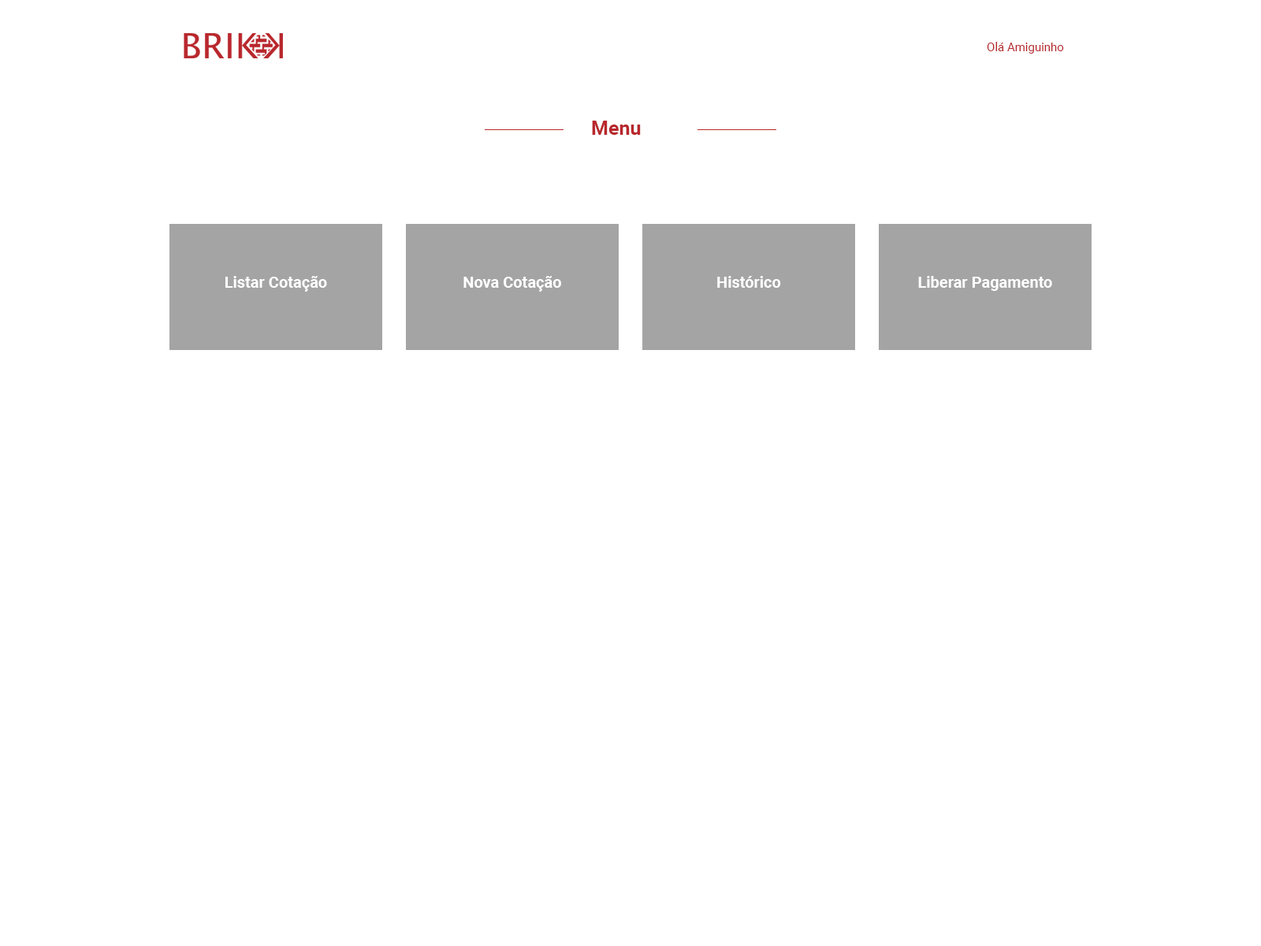
<style>
.page{position:relative;width:1261px;height:946px;background:#ffffff}
.page>*{position:absolute;margin:0}
.t1{font:11.8px "Roboto-Regular";color:#b8272c}
.t2{font:19.7px "Roboto-Bold";color:#b8272c}
.t3{font:15.8px "Roboto-Bold";color:#ffffff}
</style>
<div class="page">
<p class="t1" style="left:987px;top:42px;width:77px;height:12px">Olá Amiguinho</p>
<p class="t2" style="left:592px;top:121px;width:49px;height:14px">Menu</p>
<p class="t3" style="left:225px;top:276px;width:102px;height:16px">Listar Cotação</p>
<p class="t3" style="left:463px;top:276px;width:98px;height:16px">Nova Cotação</p>
<p class="t3" style="left:717px;top:276px;width:64px;height:12px">Histórico</p>
<p class="t3" style="left:918px;top:276px;width:134px;height:15px">Liberar Pagamento</p>
</div>
